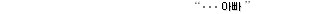
<style>
.page{position:relative;width:320px;height:14px;background:#ffffff}
.page>*{position:absolute;margin:0}
.t1{font:10px "Galmuri9-Regular";color:#000000}
</style>
<div class="page">
<p class="t1" style="left:222px;top:2px;width:19px;height:9px">아빠</p>
</div>
